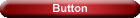
<style>
.page{position:relative;width:140px;height:18px}
.page>*{position:absolute;margin:0}
.t1{font:11px "Arial-BoldMT";color:#ffffff}
</style>
<div class="page">
<p class="t1" style="left:53px;top:4px;width:34px;height:8px">Button</p>
</div>
